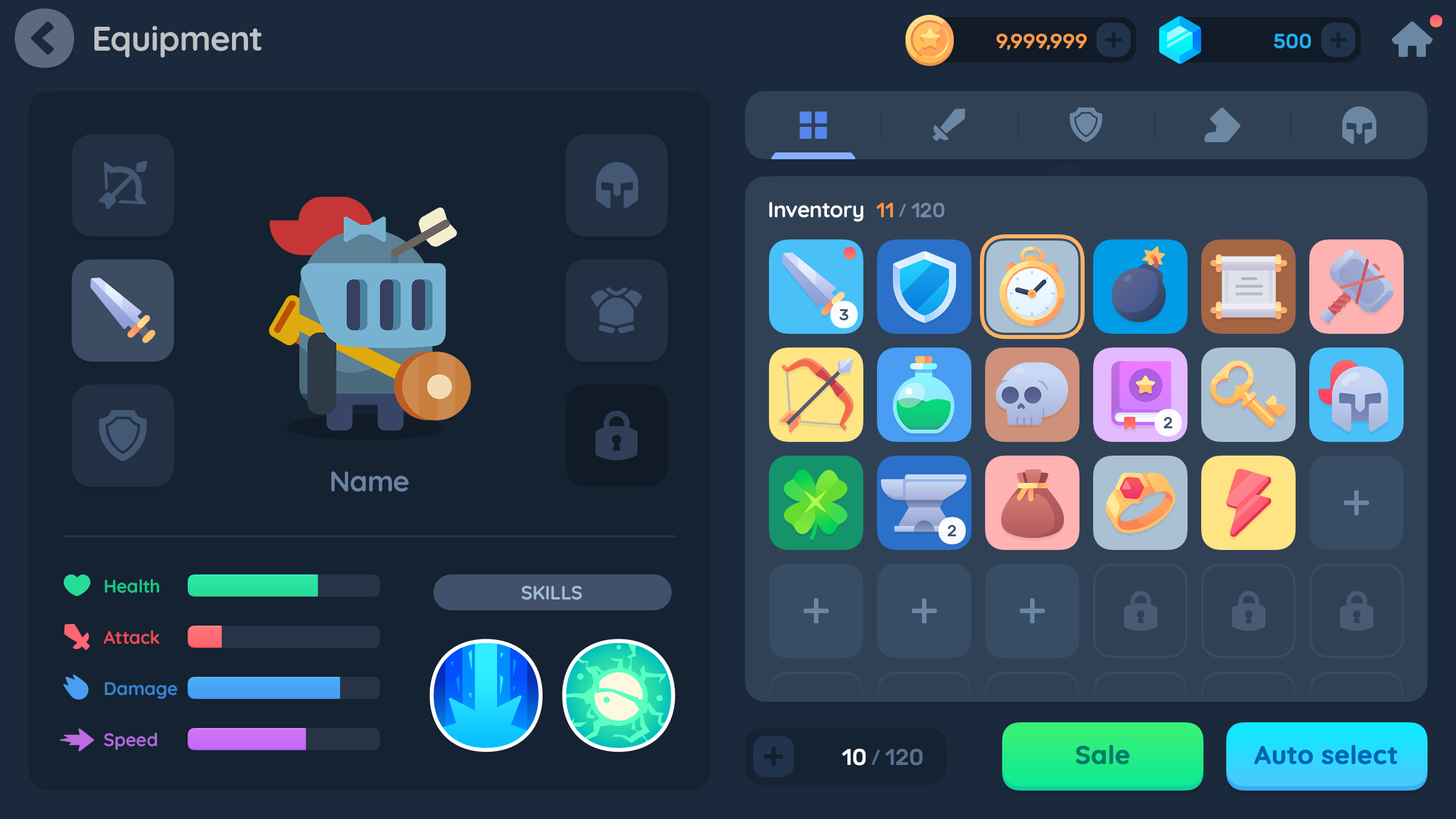
<style>
.page{position:relative;width:1456px;height:819px;background:#152231}
.page>*{position:absolute;margin:0}
.t1{font:34.1px "Quicksand-Bold";letter-spacing:-0.01em;color:#bdc1c4}
.t2{font:20.5px "Rubik-Medium";letter-spacing:-0.01em;color:#fd9744;text-transform:uppercase}
.t3{font:20.5px "Rubik-Medium";letter-spacing:-0.01em;color:#1cb0f6;text-transform:uppercase}
.t4{font:21.6px "Quicksand-Bold";letter-spacing:-0.01em;color:#ffffff}
.t5{font:20.5px "Rubik-Medium";letter-spacing:-0.01em;color:#6f89a6}
.t6{font:20.5px "Rubik-Medium";letter-spacing:-0.01em;color:#f8913f}
.t7{font:14.8px "Rubik-Medium";letter-spacing:-0.01em;color:#6f89a6}
.t8{font:15.9px "Rubik-Medium";letter-spacing:-0.01em;color:#43536c}
.t9{font:28.4px "Quicksand-Bold";letter-spacing:-0.01em;color:#6b83a2}
.t10{font:18.2px "Quicksand-Bold";letter-spacing:-0.01em;color:#16c882}
.t11{font:19.3px "Quicksand-Bold";letter-spacing:-0.01em;color:#a0bdd8;text-transform:uppercase}
.t12{font:18.2px "Quicksand-Bold";letter-spacing:-0.01em;color:#e74a57}
.t13{font:18.2px "Quicksand-Bold";letter-spacing:-0.01em;color:#3482d1}
.t14{font:18.2px "Quicksand-Bold";letter-spacing:-0.01em;color:#ac68d7}
.t15{font:22.7px "Rubik-Medium";letter-spacing:-0.01em;color:#557190}
.t16{font:22.7px "Rubik-Medium";letter-spacing:-0.01em;color:#ffffff}
.t17{font:17.1px "Rubik-Medium";letter-spacing:-0.01em;color:#557190}
.t18{font:25.6px "Quicksand-Bold";color:#007c69;font-weight:bold}
.t19{font:25.6px "Quicksand-Bold";color:#0065b4;font-weight:bold}
</style>
<div class="page">
<p class="t1" style="left:94px;top:26px;width:168px;height:31px">Equipment</p>
<p class="t2" style="left:996px;top:34px;width:91px;height:16px">9,999,999</p>
<p class="t3" style="left:1274px;top:34px;width:37px;height:14px">500</p>
<p class="t4" style="left:769px;top:202px;width:94px;height:20px">Inventory</p>
<p class="t5" style="left:876px;top:202px;width:69px;height:16px"><span class="t6">11 </span><span class="t7">/</span> 120</p>
<p class="t8" style="left:839px;top:309px;width:10px;height:12px">3</p>
<p class="t8" style="left:1164px;top:417px;width:8px;height:11px">2</p>
<p class="t9" style="left:331px;top:471px;width:78px;height:21px">Name</p>
<p class="t8" style="left:948px;top:525px;width:8px;height:11px">2</p>
<p class="t10" style="left:105px;top:579px;width:54px;height:14px">Health</p>
<p class="t11" style="left:522px;top:586px;width:60px;height:14px">Skills</p>
<p class="t12" style="left:104px;top:630px;width:55px;height:14px">Attack</p>
<p class="t13" style="left:105px;top:682px;width:72px;height:17px">Damage</p>
<p class="t14" style="left:104px;top:733px;width:53px;height:17px">Speed</p>
<p class="t15" style="left:842px;top:748px;width:81px;height:18px"><span class="t16">10 </span><span class="t17">/</span> 120</p>
<p class="t18" style="left:1075px;top:744px;width:55px;height:20px">Sale</p>
<p class="t19" style="left:1254px;top:744px;width:143px;height:20px">Auto select</p>
</div>
